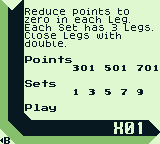
<style>
.page{position:relative;width:160px;height:144px;background:#e0f8cf}
.page>*{position:absolute;margin:0}
.t1{font:8px/8px "Dogica_Pixel";color:#071821}
.t2{font:8px/8px "PressStart2P-Regular";color:#071821}
.t3{font:8px "Early-GameBoy";color:#071821}
.t4{font:16px "Krungthep";color:#e0f8cf}
.t5{font:8px "PressStart2P-Regular";color:#071821;scale:0.87 1}
</style>
<div class="page">
<p class="t1" style="left:25px;top:8px;width:128px;height:39px">Reduce points to zero in each Leg.<br>Each Set has 3 Legs.<br>Close Legs with double.</p>
<p class="t2" style="left:25px;top:56px;width:47px;height:71px">Points<br>   <br><br>Sets<br><br><br>Play<br><br>Back</p>
<p class="t3" style="left:73px;top:65px;width:85px;height:6px">301  501  701</p>
<p class="t3" style="left:74px;top:89px;width:69px;height:6px">1  3  5  7  9</p>
<p class="t4" style="left:114px;top:122px;width:28px;height:12px">X01</p>
<p class="t5" style="left:4px;top:137px;width:6px;height:7px">B</p>
</div>
